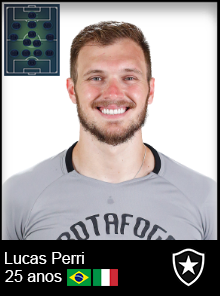
<style>
.page{position:relative;width:220px;height:296px;background:#ffffff}
.page>*{position:absolute;margin:0}
.t1{font:16px "ArialMT";color:#ffffff}
</style>
<div class="page">
<p class="t1" style="left:5px;top:252px;width:79px;height:12px">Lucas Perri</p>
<p class="t1" style="left:5px;top:270px;width:57px;height:12px">25 anos</p>
</div>
